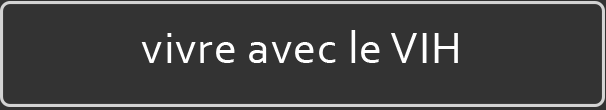
<style>
.page{position:relative;width:606px;height:110px;background:#333333}
.page>*{position:absolute;margin:0}
.t1{font:45.9px "Corbel";letter-spacing:0.02em;color:#ffffff}
</style>
<div class="page">
<p class="t1" style="left:141px;top:30px;width:317px;height:33px">vivre avec le VIH</p>
</div>
